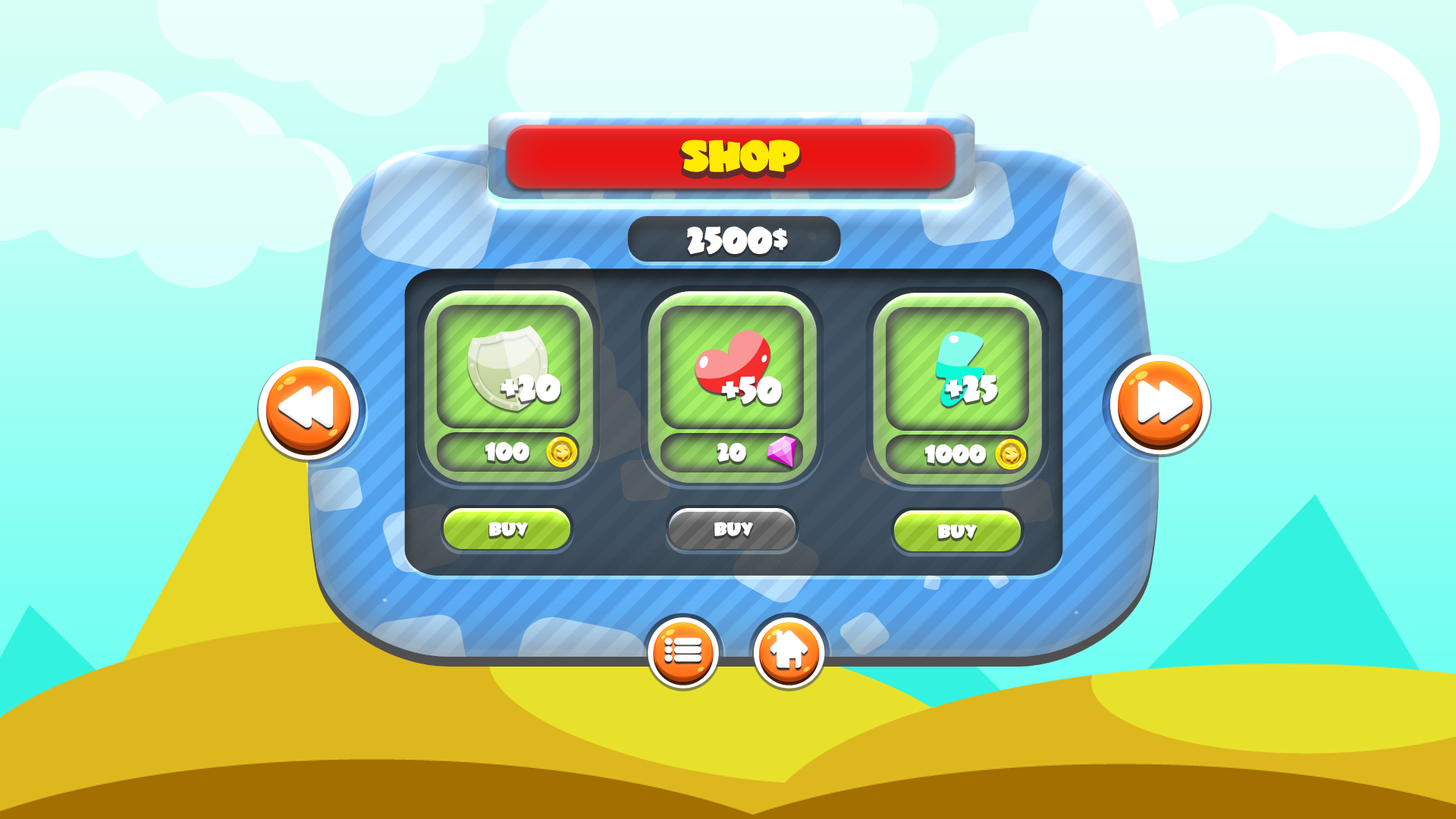
<style>
.page{position:relative;width:1456px;height:819px}
.page>*{position:absolute;margin:0}
.t1{font:31.9px "JuneBug";letter-spacing:-0.02em;color:#ffea00}
.t2{font:27.5px "JuneBug";letter-spacing:-0.02em;color:#ffffff}
.t3{font:18.5px "JuneBug";letter-spacing:-0.02em;color:#ffffff}
.t4{font:20.6px "JuneBug";letter-spacing:-0.02em;scale:1.04 1}
.t5{font:13.7px "JuneBug";letter-spacing:-0.02em;color:#ffffff}
</style>
<div class="page">
<p class="t1" style="left:681px;top:140px;width:119px;height:32px">SHOP</p>
<p class="t2" style="left:687px;top:226px;width:101px;height:28px">2500$</p>
<p class="t2" style="left:500px;top:374px;width:60px;height:28px">+20</p>
<p class="t2" style="left:721px;top:376px;width:61px;height:28px">+50</p>
<p class="t2" style="left:945px;top:375px;width:53px;height:28px">+25</p>
<p class="t3" style="left:485px;top:442px;width:44px;height:19px">100</p>
<p class="t4" style="left:556px;top:443px;width:12px;height:17px">$</p>
<p class="t3" style="left:717px;top:443px;width:29px;height:19px">20</p>
<p class="t3" style="left:925px;top:444px;width:62px;height:19px">1000</p>
<p class="t4" style="left:1005px;top:445px;width:12px;height:17px">$</p>
<p class="t5" style="left:489px;top:522px;width:39px;height:14px">BUY</p>
<p class="t5" style="left:714px;top:522px;width:39px;height:14px">BUY</p>
<p class="t5" style="left:938px;top:524px;width:39px;height:14px">BUY</p>
</div>
